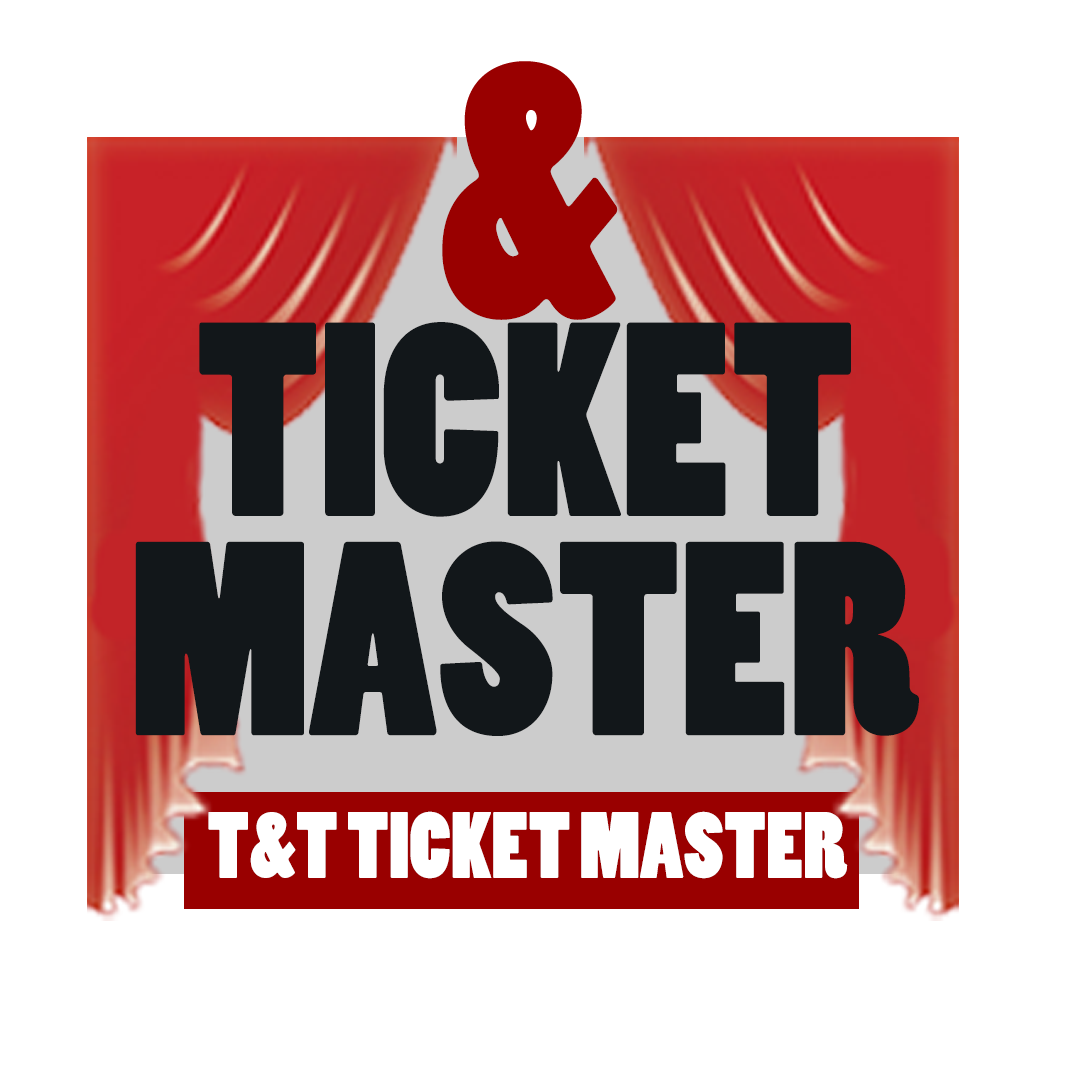
<style>
.page{position:relative;width:1080px;height:1080px;background:#ffffff}
.page>*{position:absolute;margin:0}
.t1{font:344.8px "PoplarStd";color:#990000}
.t2{font:257.6px "PoplarStd";color:#12171a}
.t3{font:88px "PoplarStd";color:#ffffff}
</style>
<div class="page">
<p class="t1" style="left:442px;top:61px;width:176px;height:259px">&amp;</p>
<p class="t2" style="left:199px;top:322px;width:652px;height:195px">TICKET</p>
<p class="t2" style="left:135px;top:541px;width:784px;height:195px">MASTER</p>
<p class="t3" style="left:208px;top:811px;width:640px;height:68px">T&amp;T TICKET MASTER</p>
</div>
